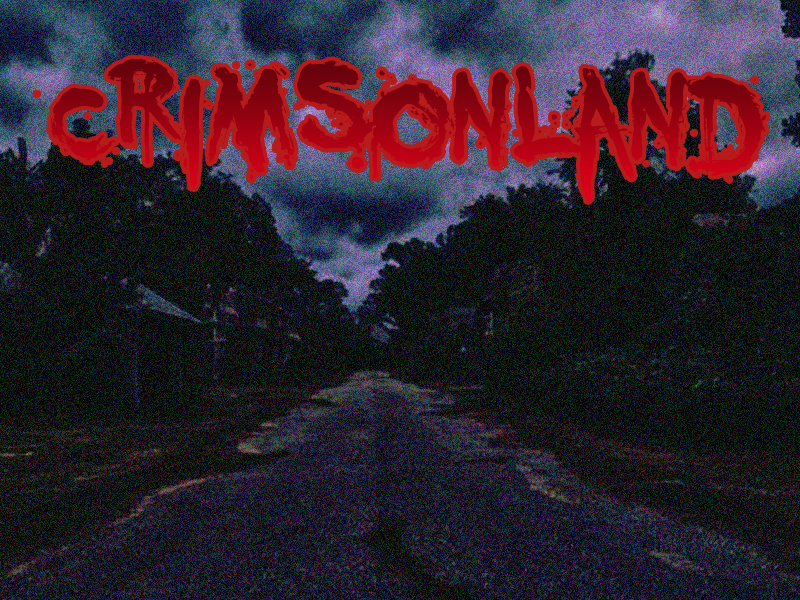
<style>
.page{position:relative;width:800px;height:600px}
.page>*{position:absolute;margin:0}
.t1{font:200px "YouMurdererBB"}
</style>
<div class="page">
<p class="t1" style="left:36px;top:58px;width:731px;height:143px">Crimsonland</p>
</div>
